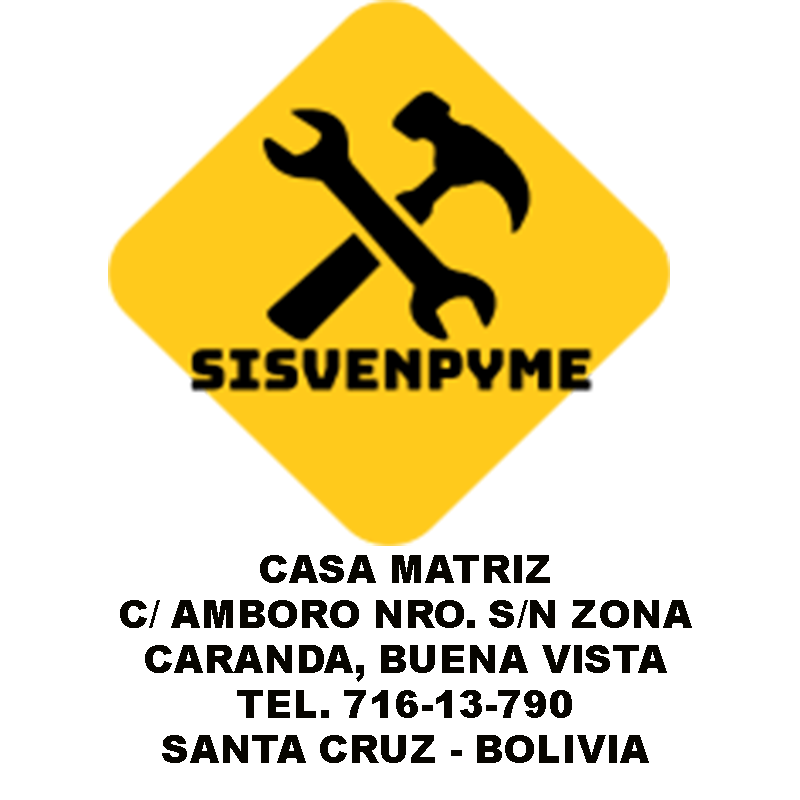
<style>
.page{position:relative;width:800px;height:800px;background:#ffffff}
.page>*{position:absolute;margin:0}
.t1{font:37.5px "Arial-Black";color:#070500}
</style>
<div class="page">
<p class="t1" style="left:120px;top:555px;width:572px;height:208px;text-align:center">CASA MATRIZ<br>C/ AMBORO NRO. S/N ZONA<br>CARANDA, BUENA VISTA<br>TEL. 716-13-790<br>SANTA CRUZ - BOLIVIA</p>
</div>
